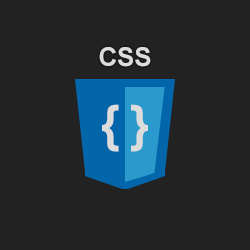
<style>
.page{position:relative;width:250px;height:250px;background:#222222}
.page>*{position:absolute;margin:0}
.t1{font:26px "Arial-BoldMT";letter-spacing:-0.01em;color:#f1f1f1;font-variant:small-caps}
.t2{font:50px "Arial-BoldMT";letter-spacing:0.2em;color:#f1f1f1;font-variant:small-caps}
</style>
<div class="page">
<p class="t1" style="left:99px;top:47px;width:52px;height:20px">CSS</p>
<p class="t2" style="left:102px;top:104px;width:46px;height:48px">{}</p>
</div>
